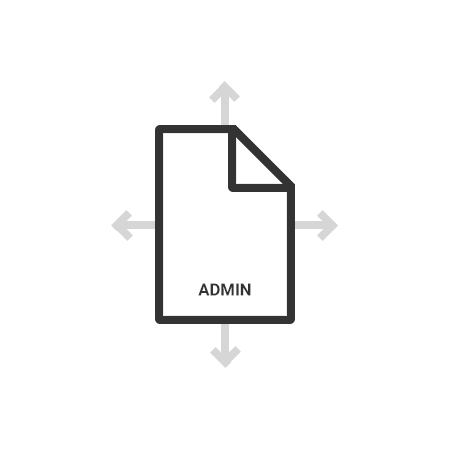
<style>
.page{position:relative;width:450px;height:450px;background:#ffffff}
.page>*{position:absolute;margin:0}
.t1{font:16.9px "Roboto-Bold";color:#333333}
</style>
<div class="page">
<p class="t1" style="left:198px;top:283px;width:53px;height:13px">ADMIN</p>
</div>
